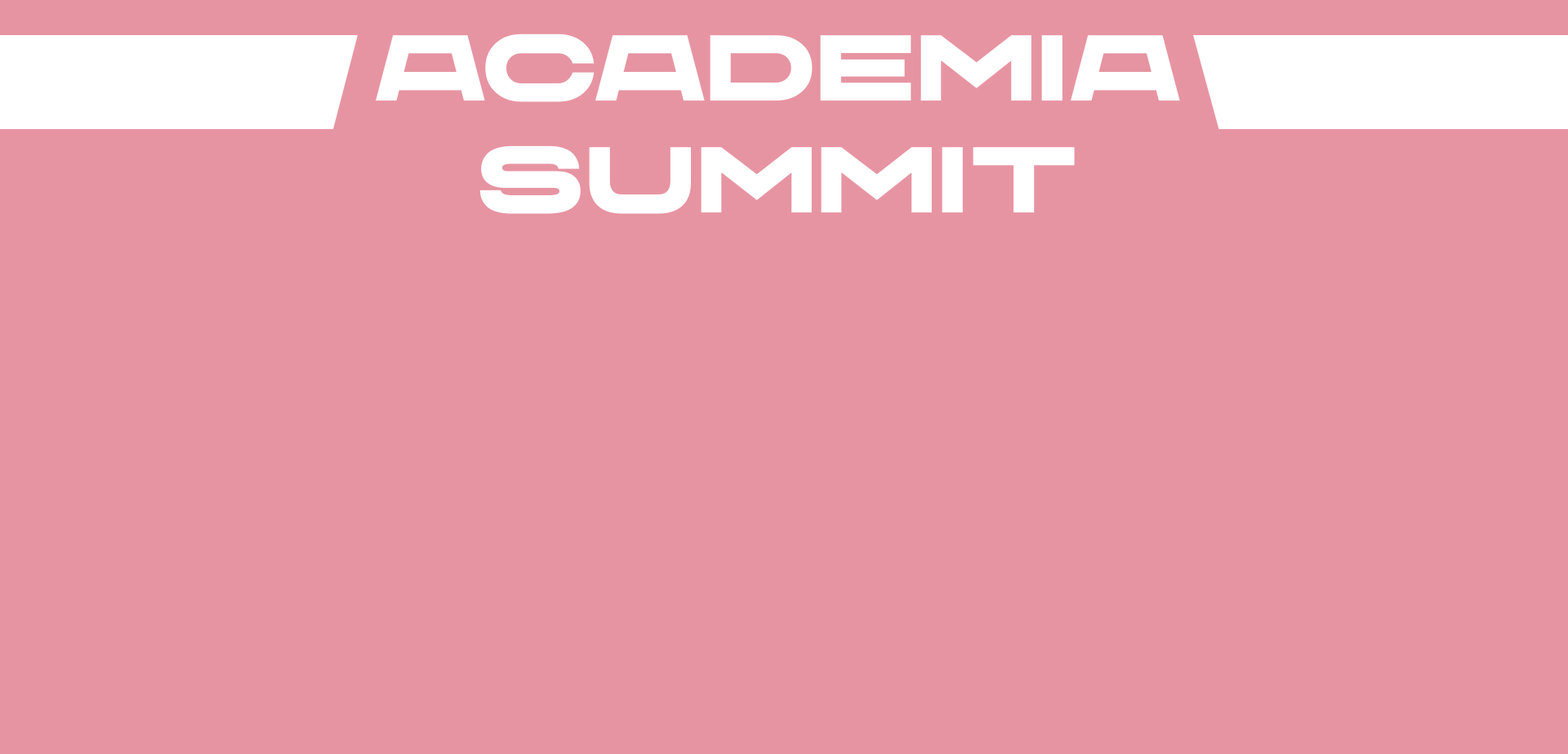
<style>
.page{position:relative;width:1568px;height:754px;background:#e794a2}
.page>*{position:absolute;margin:0}
.t1{font:93.1px "CHANEY-UltraExtended";letter-spacing:0.01em;color:#ffffff}
</style>
<div class="page">
<p class="t1" style="left:376px;top:33px;width:804px;height:181px;text-align:center">Academia<br>Summit</p>
</div>
